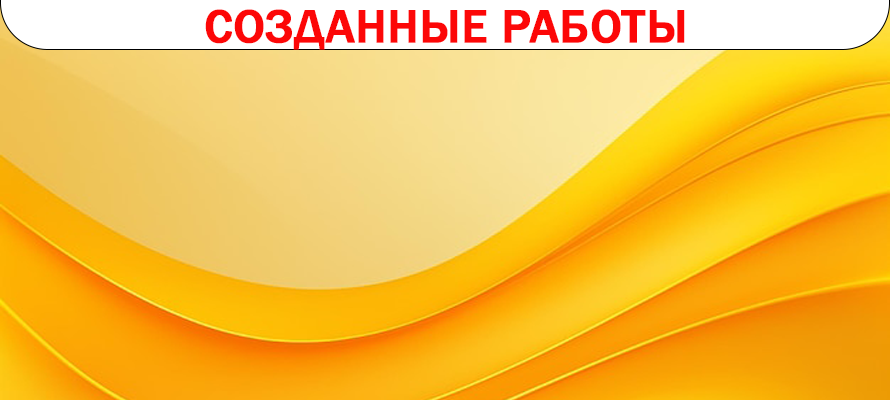
<style>
.page{position:relative;width:890px;height:400px}
.page>*{position:absolute;margin:0}
.t1{font:48px "FranklinGothic-Medium";color:#fc0707;text-transform:uppercase;font-weight:bold}
</style>
<div class="page">
<p class="t1" style="left:205px;top:9px;width:480px;height:41px">Созданные работы</p>
</div>
